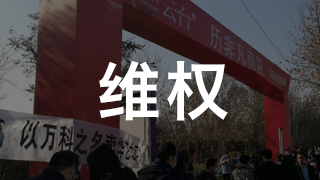
<style>
.page{position:relative;width:320px;height:180px}
.page>*{position:absolute;margin:0}
.t1{font:64px "HiraginoSansGB-W6";letter-spacing:0.05em;color:#ffffff}
</style>
<div class="page">
<p class="t1" style="left:99px;top:61px;width:129px;height:60px">维权</p>
</div>
